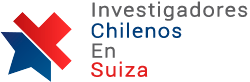
<style>
.page{position:relative;width:250px;height:82px;background:#ffffff}
.page>*{position:absolute;margin:0}
.t1{font:19px "Roboto-Light";letter-spacing:0.05em;color:#5f5f61;font-weight:bold;scale:1.11 1}
.t2{font:19px "Roboto-Light";letter-spacing:0.05em;color:#003d7a;font-weight:bold;scale:1.11 1}
.t3{font:19px "Roboto-Light";letter-spacing:0.05em;color:#e31f1f;font-weight:bold;scale:1.11 1}
</style>
<div class="page">
<p class="t1" style="left:92px;top:1px;width:156px;height:20px">Investigadores</p>
<p class="t2" style="left:91px;top:22px;width:91px;height:16px">Chilenos</p>
<p class="t1" style="left:92px;top:43px;width:23px;height:15px">En</p>
<p class="t3" style="left:91px;top:61px;width:57px;height:16px">Suiza</p>
</div>
